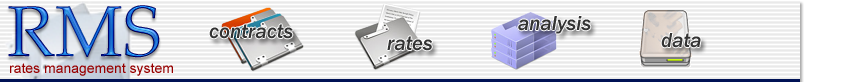
<style>
.page{position:relative;width:850px;height:82px;background:#ffffff}
.page>*{position:absolute;margin:0}
.t1{font:72px "PalatinoLinotype-Roman"}
.t2{font:21px "FranklinGothic-MediumItalic";color:#333333}
.t3{font:14px "ArialMT";color:#970000}
</style>
<div class="page">
<p class="t1" style="left:8px;top:5px;width:152px;height:53px">RMS</p>
<p class="t2" style="left:518px;top:16px;width:73px;height:18px">analysis</p>
<p class="t2" style="left:209px;top:24px;width:84px;height:15px">contracts</p>
<p class="t2" style="left:387px;top:36px;width:46px;height:15px">rates</p>
<p class="t2" style="left:661px;top:33px;width:40px;height:15px">data</p>
<p class="t3" style="left:10px;top:63px;width:163px;height:13px">rates management system</p>
</div>
